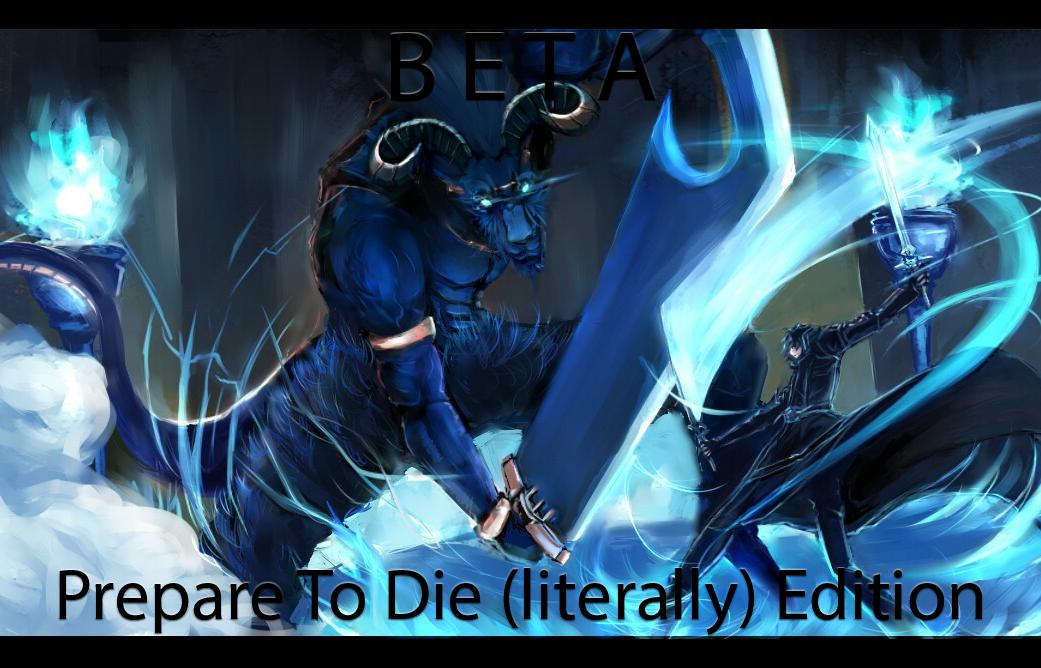
<style>
.page{position:relative;width:1041px;height:668px}
.page>*{position:absolute;margin:0}
.t1{font:100px "MyriadPro-Regular";color:#000000}
.t2{font:72px "MyriadPro-Regular";color:#000000}
</style>
<div class="page">
<p class="t1" style="left:391px;top:33px;width:264px;height:68px">B E T A</p>
<p class="t1" style="left:391px;top:33px;width:264px;height:68px">B E T A</p>
<p class="t2" style="left:59px;top:568px;width:923px;height:67px">Prepare To Die (literally) Edition</p>
<p class="t2" style="left:59px;top:568px;width:923px;height:67px">Prepare To Die (literally) Edition</p>
</div>
